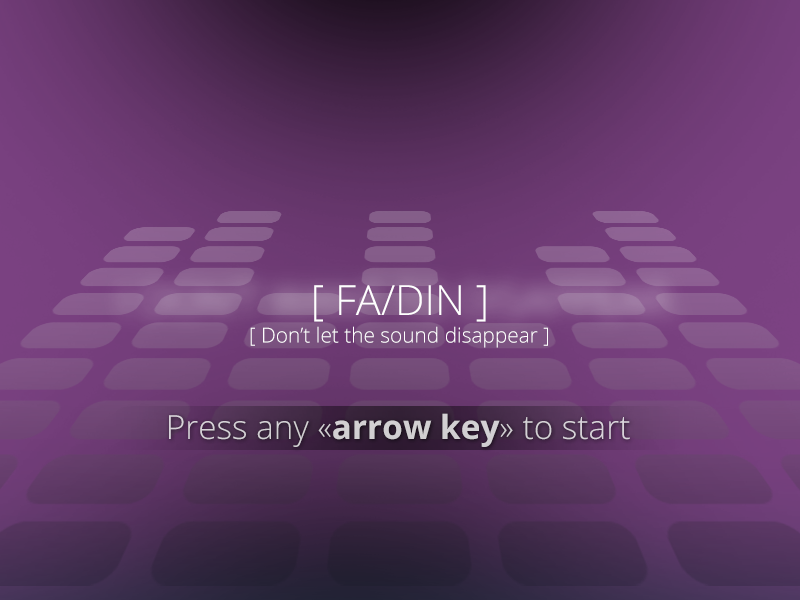
<style>
.page{position:relative;width:800px;height:600px}
.page>*{position:absolute;margin:0}
.t1{font:41.7px "OpenSans-Light";color:#ffffff}
.t2{font:20.8px "OpenSans-Light";color:#ffffff}
.t3{font:33.3px "OpenSans-Light";color:#d2d0d2}
.t4{font:33.3px "OpenSans-Bold";color:#d2d0d2}
</style>
<div class="page">
<p class="t1" style="left:314px;top:285px;width:172px;height:37px">[ FA/DIN ]</p>
<p class="t2" style="left:250px;top:326px;width:298px;height:22px">[ Don’t let the sound disappear ]</p>
<p class="t3" style="left:169px;top:413px;width:461px;height:34px">Press any «<span class="t4">arrow key</span>» to start</p>
</div>
